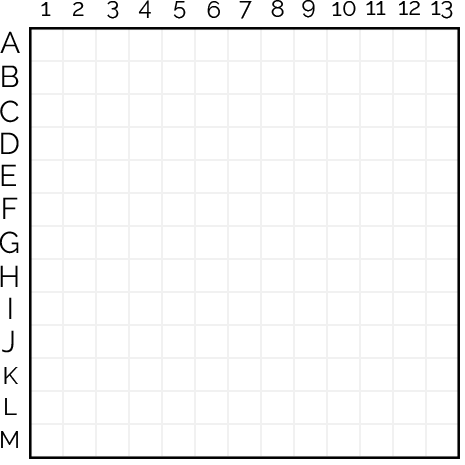
<style>
.page{position:relative;width:465px;height:465px;background:#ffffff}
.page>*{position:absolute;margin:0}
.t1{font:24px "Raleway-Regular";color:#000000}
.t2{font:30px "Raleway-Regular";color:#000000}
</style>
<div class="page">
<p class="t1" style="left:41px;top:2px;width:10px;height:14px">1</p>
<p class="t1" style="left:73px;top:2px;width:11px;height:14px">2</p>
<p class="t1" style="left:107px;top:1px;width:12px;height:18px">3</p>
<p class="t1" style="left:138px;top:0px;width:13px;height:18px">4</p>
<p class="t1" style="left:173px;top:1px;width:13px;height:18px">5</p>
<p class="t1" style="left:207px;top:1px;width:13px;height:17px">6</p>
<p class="t1" style="left:239px;top:1px;width:13px;height:18px">7</p>
<p class="t1" style="left:271px;top:0px;width:13px;height:17px">8</p>
<p class="t1" style="left:302px;top:0px;width:13px;height:18px">9</p>
<p class="t1" style="left:332px;top:1px;width:24px;height:15px">10</p>
<p class="t1" style="left:366px;top:1px;width:20px;height:14px">11</p>
<p class="t1" style="left:399px;top:1px;width:21px;height:14px">12</p>
<p class="t1" style="left:431px;top:1px;width:22px;height:18px">13</p>
<p class="t2" style="left:0px;top:31px;width:20px;height:22px">A</p>
<p class="t2" style="left:2px;top:65px;width:17px;height:22px">B</p>
<p class="t2" style="left:0px;top:100px;width:19px;height:23px">C</p>
<p class="t2" style="left:1px;top:132px;width:18px;height:22px">D</p>
<p class="t2" style="left:1px;top:164px;width:15px;height:22px">E</p>
<p class="t2" style="left:3px;top:197px;width:15px;height:22px">F</p>
<p class="t2" style="left:0px;top:231px;width:19px;height:23px">G</p>
<p class="t2" style="left:0px;top:265px;width:18px;height:22px">H</p>
<p class="t2" style="left:9px;top:297px;width:3px;height:22px">I</p>
<p class="t2" style="left:2px;top:330px;width:12px;height:23px">J</p>
<p class="t1" style="left:4px;top:367px;width:14px;height:17px">K</p>
<p class="t1" style="left:5px;top:398px;width:12px;height:17px">L</p>
<p class="t1" style="left:1px;top:431px;width:17px;height:17px">M</p>
</div>
